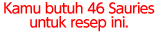
<style>
.page{position:relative;width:157px;height:32px;background:#ffffff}
.page>*{position:absolute;margin:0}
.t1{font:14px/14px "UDShinGoPro-Medium";letter-spacing:-0.04em;color:#ff0000}
</style>
<div class="page">
<p class="t1" style="left:4px;top:2px;width:151px;height:30px;text-align:center">Kamu butuh 46 Sauries<br>untuk resep ini.</p>
</div>
